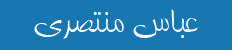
<style>
.page{position:relative;width:232px;height:50px;background:#1777b1}
.page>*{position:absolute;margin:0}
.t1{font:40px "BTabassom";color:#ffffff}
</style>
<div class="page">
<p class="t1" style="left:34px;top:9px;width:164px;height:30px">عباس منتصري</p>
</div>
